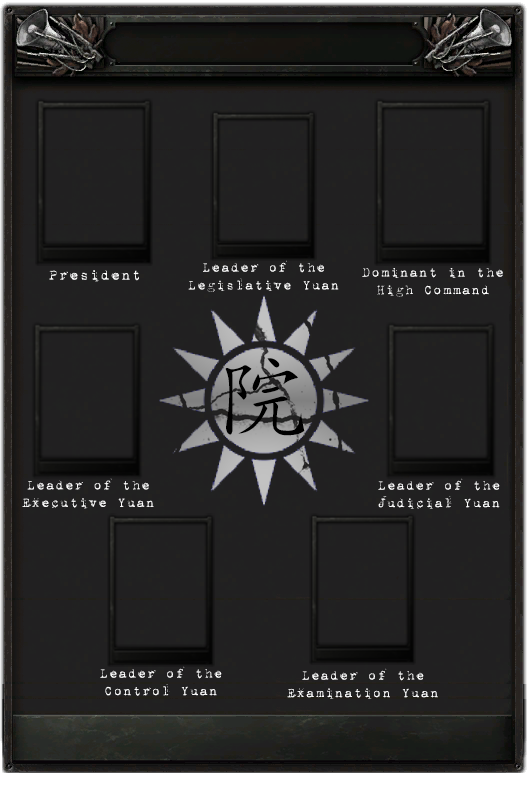
<style>
.page{position:relative;width:527px;height:800px;background:#212021}
.page>*{position:absolute;margin:0}
.t1{font:16px "1942report";color:#ffffff}
.t2{font:14.7px "1942report";color:#ffffff}
</style>
<div class="page">
<p class="t1" style="left:49px;top:270px;width:90px;height:12px">President</p>
<p class="t2" style="left:188px;top:260px;width:151px;height:32px;text-align:center">Leader of the<br>Legislative Yuan</p>
<p class="t2" style="left:362px;top:268px;width:141px;height:29px;text-align:center">Dominant in the<br>High Command</p>
<p class="t2" style="left:22px;top:478px;width:132px;height:31px;text-align:center">Leader of the<br>Executive Yuan</p>
<p class="t2" style="left:378px;top:478px;width:122px;height:31px;text-align:center">Leader of the<br>Judicial Yuan</p>
<p class="t2" style="left:100px;top:666px;width:122px;height:30px;text-align:center">Leader of the<br>Control Yuan</p>
<p class="t2" style="left:287px;top:668px;width:151px;height:31px;text-align:center">Leader of the<br>Examination Yuan</p>
</div>
